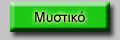
<style>
.page{position:relative;width:120px;height:40px}
.page>*{position:absolute;margin:0}
.t1{font:14px "ArialMT";color:#000000}
</style>
<div class="page">
<p class="t1" style="left:35px;top:11px;width:50px;height:11px">Μυστικό</p>
</div>
